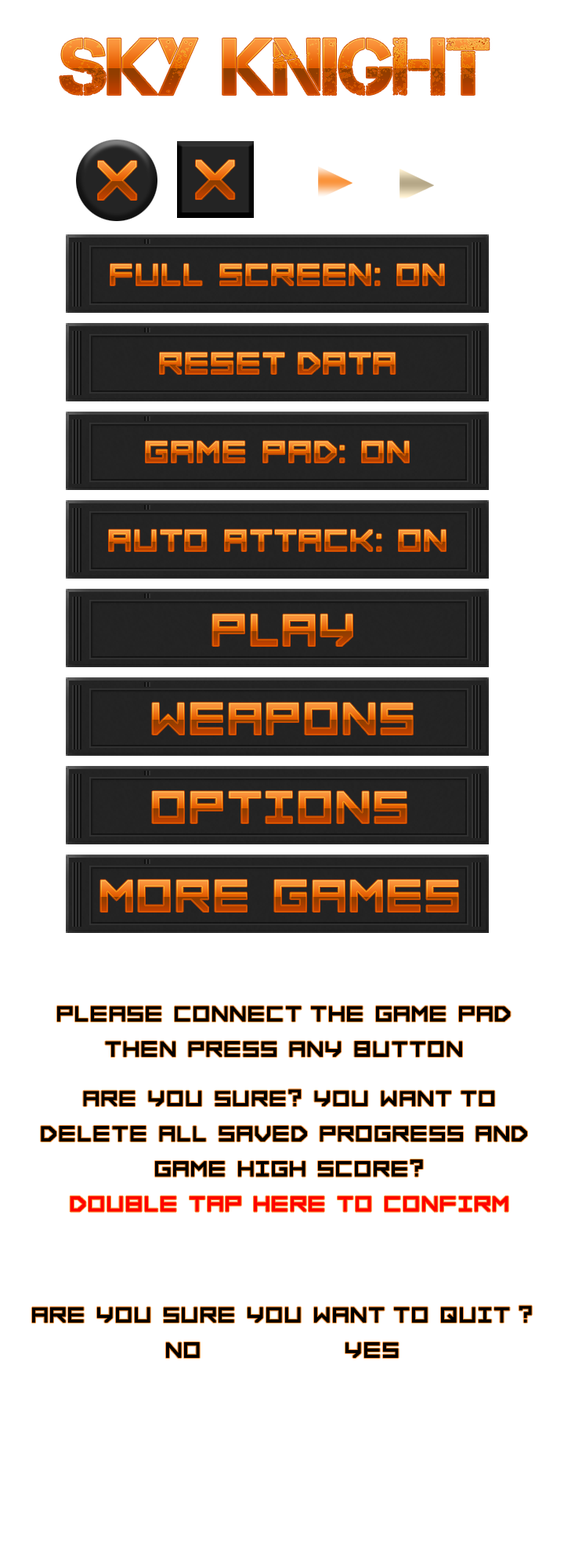
<style>
.page{position:relative;width:564px;height:1568px;background:#ffffff}
.page>*{position:absolute;margin:0}
.t1{font:80.5px "Captureit";text-transform:uppercase}
.t2{font:74.2px "FORCED-SQUARE";text-transform:uppercase}
.t3{font:40.8px "FORCED-SQUARE";text-transform:uppercase}
.t4{font:60.6px "FORCED-SQUARE";text-transform:uppercase}
.t5{font:29.3px "FORCED-SQUARE";color:#000000;text-transform:uppercase}
.t6{font:29.3px "FORCED-SQUARE";color:#ff0000;text-transform:uppercase}
</style>
<div class="page">
<p class="t1" style="left:60px;top:38px;width:430px;height:58px">SKY KNIGHT</p>
<p class="t2" style="left:98px;top:161px;width:39px;height:39px">X</p>
<p class="t2" style="left:196px;top:160px;width:39px;height:39px">X</p>
<p class="t3" style="left:111px;top:263px;width:334px;height:22px">FULL SCREEN: ON</p>
<p class="t3" style="left:160px;top:352px;width:236px;height:22px">RESET DATA</p>
<p class="t3" style="left:146px;top:441px;width:263px;height:22px">GAME PAD: ON</p>
<p class="t3" style="left:109px;top:529px;width:337px;height:22px">AUTO ATTACK: ON</p>
<p class="t4" style="left:212px;top:614px;width:141px;height:32px">PLAY</p>
<p class="t4" style="left:152px;top:702px;width:261px;height:33px">WEAPONs</p>
<p class="t4" style="left:152px;top:791px;width:255px;height:32px">OPTIONS</p>
<p class="t4" style="left:100px;top:880px;width:359px;height:32px">MORE GAMES</p>
<p class="t5" style="left:57px;top:1006px;width:454px;height:51px;text-align:center">Please Connect THE Game pad<br>then press any button</p>
<p class="t5" style="left:41px;top:1089px;width:487px;height:123px;text-align:center">ARE YOU SURE? YOU WANT TO<br>DELETE ALL SAVED PROGRESS AND <br>GAME HIGH SCORE?<br><span class="t6">DOUBLE TAP HERE TO CONFIRM</span></p>
<p class="t5" style="left:32px;top:1305px;width:500px;height:53px;text-align:center">ARE YOU SURE YOU WANT TO QUIT ?<br>NO              YES</p>
</div>
